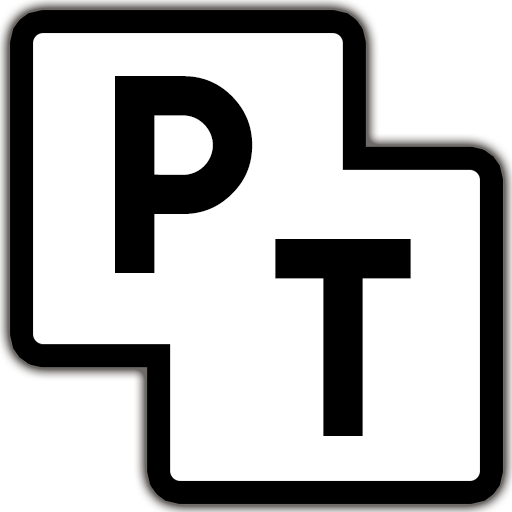
<style>
.page{position:relative;width:512px;height:512px;background:#ffffff}
.page>*{position:absolute;margin:0}
.t1{font:250px "LemonMilk";color:#000000}
</style>
<div class="page">
<p class="t1" style="left:115px;top:76px;width:138px;height:197px">p</p>
<p class="t1" style="left:275px;top:239px;width:136px;height:197px">t</p>
</div>
